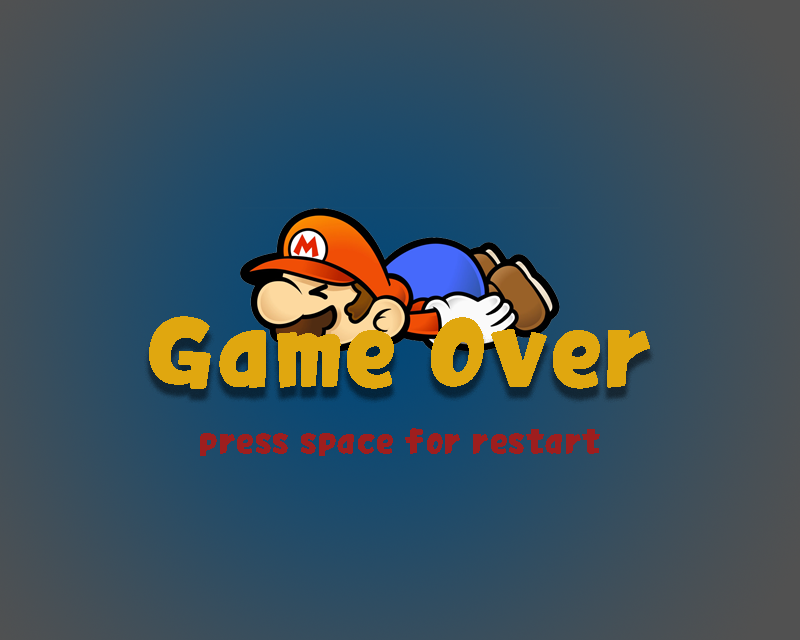
<style>
.page{position:relative;width:800px;height:640px}
.page>*{position:absolute;margin:0}
.t1{font:86.7px "KoreanPKS-R";letter-spacing:0.05em;color:#e0a70f}
.t2{font:30px "KoreanPKS-R";letter-spacing:0.05em;color:#9e1e1e}
</style>
<div class="page">
<p class="t1" style="left:149px;top:316px;width:501px;height:73px">Game Over</p>
<p class="t2" style="left:200px;top:428px;width:400px;height:28px">press space for restart</p>
</div>
